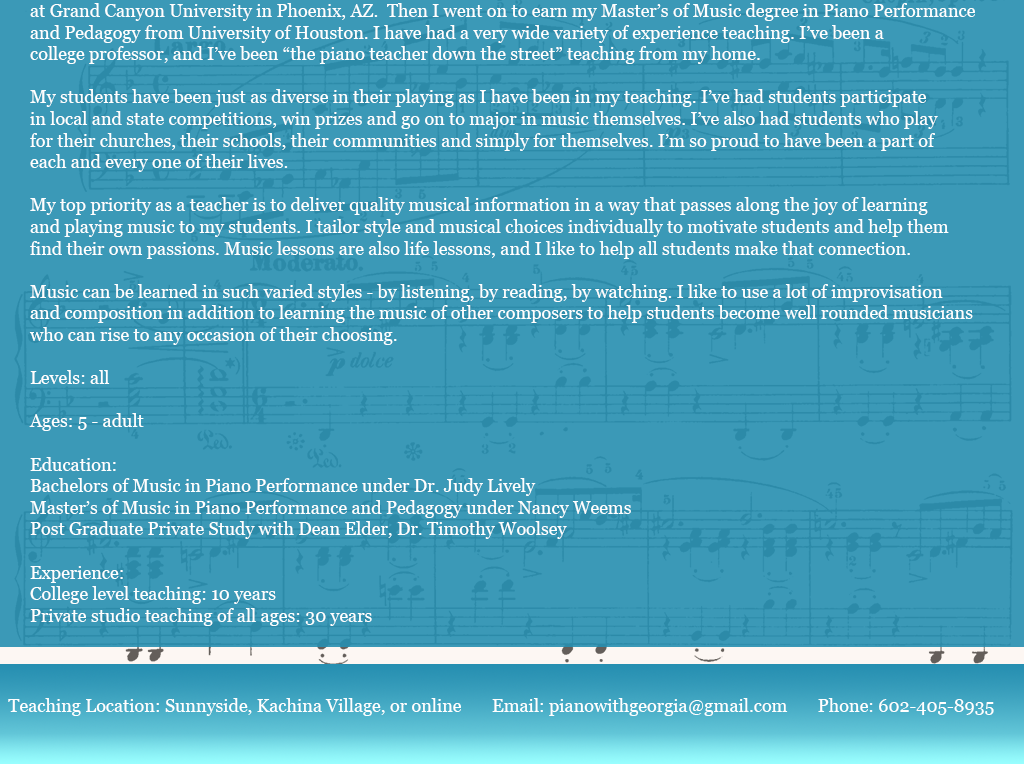
<style>
.page{position:relative;width:1024px;height:764px;background:#3b99b7}
.page>*{position:absolute;margin:0}
.t1{font:18px "Georgia";color:#ffffff}
</style>
<div class="page">
<p class="t1" style="left:29px;top:3px;width:946px;height:623px">at Grand Canyon University in Phoenix, AZ.  Then I went on to earn my Master’s of Music degree in Piano Performance <br>and Pedagogy from University of Houston. I have had a very wide variety of experience teaching. I’ve been a <br>college professor, and I’ve been “the piano teacher down the street” teaching from my home.<br><br>My students have been just as diverse in their playing as I have been in my teaching. I’ve had students participate <br>in local and state competitions, win prizes and go on to major in music themselves. I’ve also had students who play <br>for their churches, their schools, their communities and simply for themselves. I’m so proud to have been a part of <br>each and every one of their lives. <br><br>My top priority as a teacher is to deliver quality musical information in a way that passes along the joy of learning <br>and playing music to my students. I tailor style and musical choices individually to motivate students and help them <br>find their own passions. Music lessons are also life lessons, and I like to help all students make that connection.<br><br>Music can be learned in such varied styles - by listening, by reading, by watching. I like to use a lot of improvisation <br>and composition in addition to learning the music of other composers to help students become well rounded musicians <br>who can rise to any occasion of their choosing. <br><br>Levels: all<br><br>Ages: 5 - adult<br><br>Education:<br>Bachelors of Music in Piano Performance under Dr. Judy Lively<br>Master’s of Music in Piano Performance and Pedagogy under Nancy Weems<br>Post Graduate Private Study with Dean Elder, Dr. Timothy Woolsey<br><br>Experience: <br>College level teaching: 10 years<br>Private studio teaching of all ages: 30 years</p>
<p class="t1" style="left:8px;top:698px;width:986px;height:18px">Teaching Location: Sunnyside, Kachina Village, or online       Email: pianowithgeorgia@gmail.com       Phone: 602-405-8935</p>
</div>
